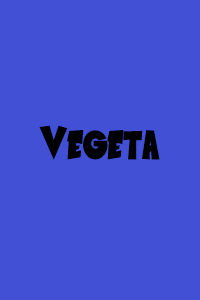
<style>
.page{position:relative;width:200px;height:300px;background:#4250d5}
.page>*{position:absolute;margin:0}
.t1{font:48px "SaiyanSans";color:#000000}
</style>
<div class="page">
<p class="t1" style="left:39px;top:125px;width:121px;height:35px">Vegeta</p>
</div>
